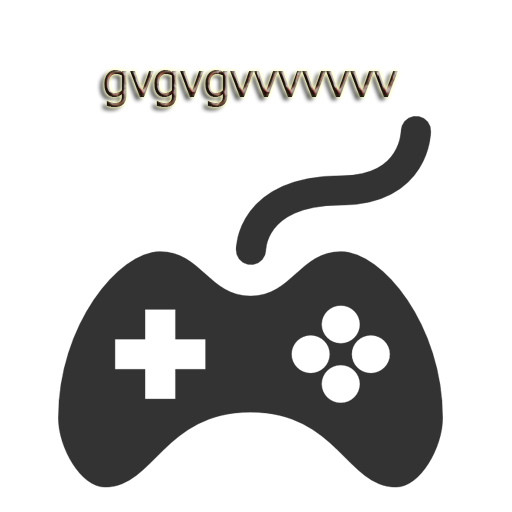
<style>
.page{position:relative;width:512px;height:512px;background:#ffffff}
.page>*{position:absolute;margin:0}
.t1{font:48px "Tahoma"}
</style>
<div class="page">
<p class="t1" style="left:104px;top:70px;width:294px;height:37px">gvgvgvvvvvvv</p>
</div>
